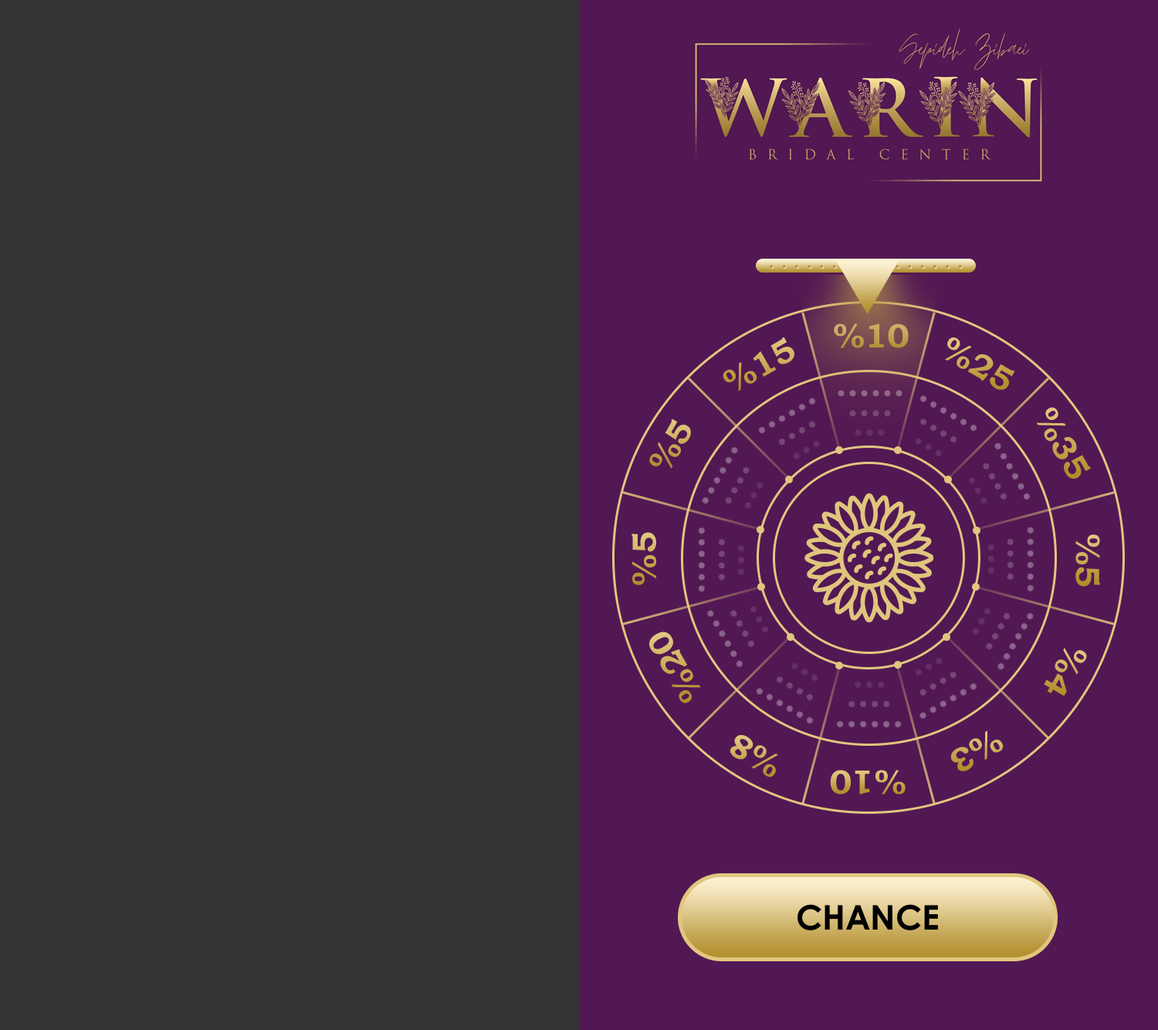
<style>
.page{position:relative;width:1158px;height:1030px;background:#333333}
.page>*{position:absolute;margin:0}
.t1{font:17px "BookmanOldStyle-Bold";letter-spacing:0.4em;color:#b3964c}
.t2{font:34px "BookmanOldStyle-Bold";color:#c0a252}
.t3{font:34px "BookmanOldStyle-Bold"}
.t4{font:34px "CenturyGothic-Bold";color:#000000}
</style>
<div class="page">
<p class="t1" style="left:770px;top:265px;width:192px;height:4px">................</p>
<p class="t2" style="left:834px;top:323px;width:75px;height:25px">%10</p>
<p class="t3" style="left:723px;top:337px;width:71px;height:54px;rotate:-30deg">%15</p>
<p class="t3" style="left:945px;top:337px;width:70px;height:53px;rotate:30deg">%25</p>
<p class="t3" style="left:1037px;top:407px;width:54px;height:72px;rotate:60deg">%35</p>
<p class="t3" style="left:649px;top:418px;width:42px;height:51px;rotate:-60deg">%5</p>
<p class="t3" style="left:631px;top:532px;width:25px;height:53px;rotate:-90deg">%5</p>
<p class="t3" style="left:1075px;top:534px;width:25px;height:53px;rotate:90deg">%5</p>
<p class="t3" style="left:649px;top:631px;width:52px;height:72px;rotate:-120deg">%20</p>
<p class="t3" style="left:1044px;top:648px;width:43px;height:48px;rotate:120deg">%4</p>
<p class="t3" style="left:729px;top:735px;width:49px;height:42px;rotate:-150deg">%8</p>
<p class="t3" style="left:950px;top:730px;width:54px;height:41px;rotate:150deg">%3</p>
<p class="t3" style="left:830px;top:770px;width:76px;height:24px;rotate:-180deg">%10</p>
<p class="t4" style="left:797px;top:904px;width:141px;height:26px">CHANCE</p>
</div>
